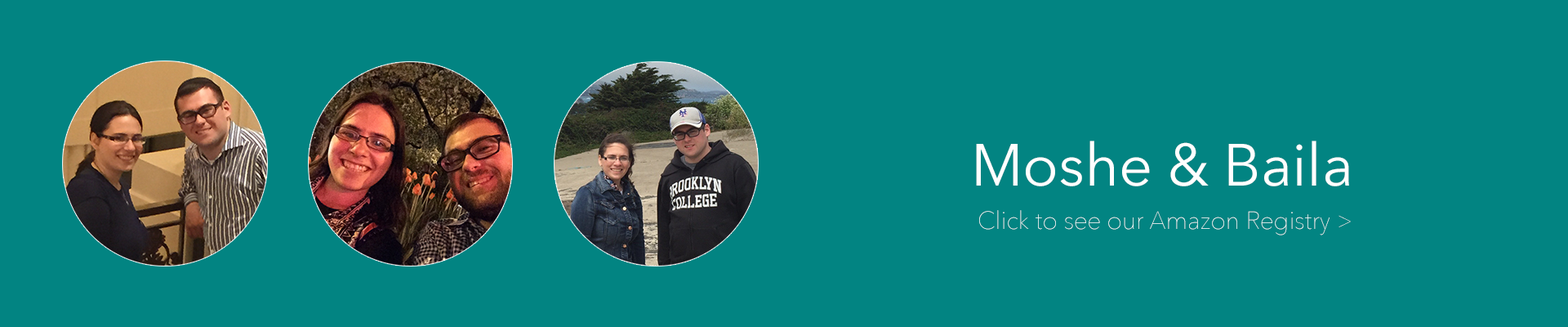
<style>
.page{position:relative;width:1568px;height:327px;background:#028482}
.page>*{position:absolute;margin:0}
.t1{font:58.8px "AvenirNext-Regular";color:#ffffff}
.t2{font:24.5px "AvenirNext-UltraLight";color:#ffffff}
</style>
<div class="page">
<p class="t1" style="left:976px;top:140px;width:373px;height:46px">Moshe &amp; Baila</p>
<p class="t2" style="left:979px;top:210px;width:372px;height:25px">Click to see our Amazon Registry &gt;</p>
</div>
